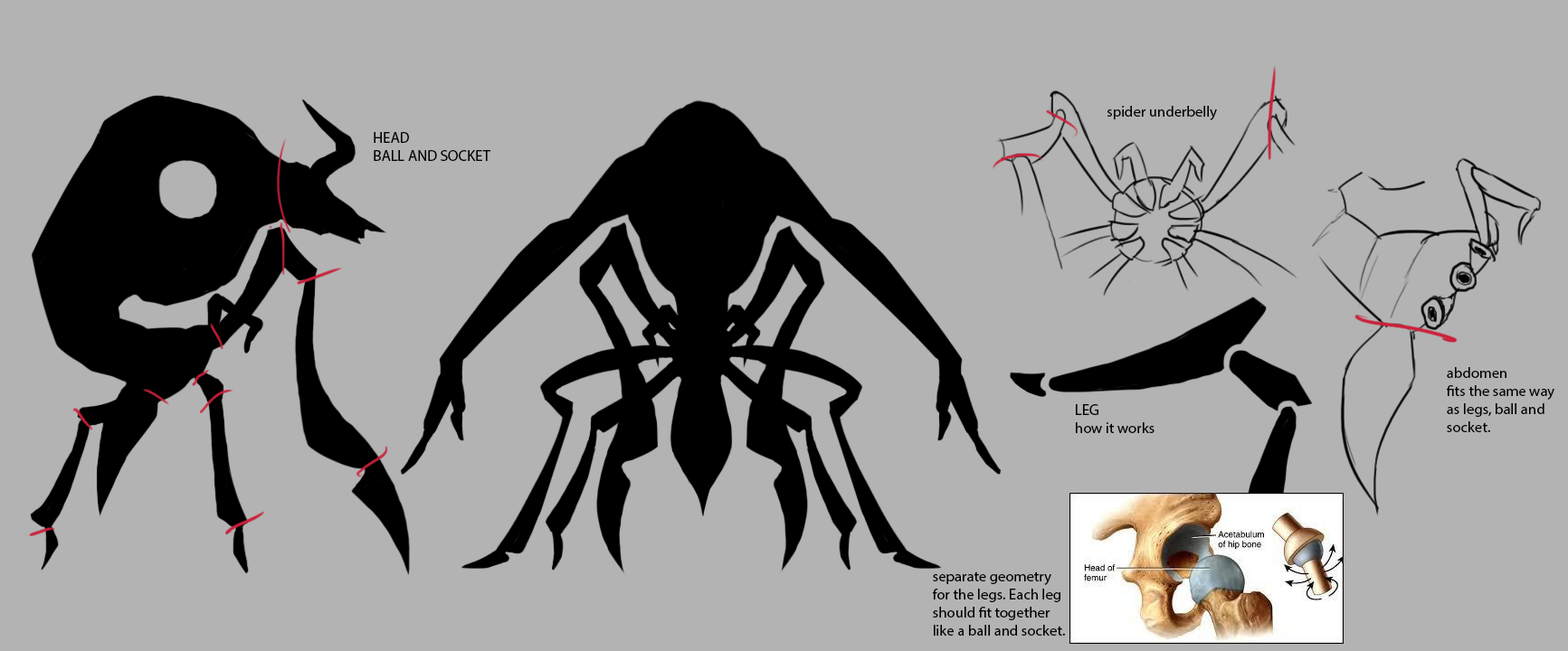
<style>
.page{position:relative;width:1568px;height:651px;background:#b3b3b3}
.page>*{position:absolute;margin:0}
.t1{font:10.9px "MyriadPro-Regular";color:#000000}
</style>
<div class="page">
<p class="t1" style="left:1107px;top:106px;width:110px;height:14px">spider underbelly</p>
<p class="t1" style="left:374px;top:132px;width:117px;height:29px">HEAD<br>BALL AND SOCKET</p>
<p class="t1" style="left:1446px;top:367px;width:108px;height:65px">abdomen<br>fits the same way<br>as legs, ball and<br>socket.</p>
<p class="t1" style="left:1076px;top:404px;width:79px;height:29px">LEG <br>how it works</p>
<p class="t1" style="left:932px;top:572px;width:133px;height:64px">separate geometry<br>for the legs. Each leg<br>should fit together<br>like a ball and socket.</p>
</div>
